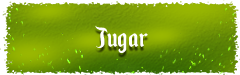
<style>
.page{position:relative;width:240px;height:75px}
.page>*{position:absolute;margin:0}
.t1{font:32.5px "EnchantedLand";color:#ffffff}
</style>
<div class="page">
<p class="t1" style="left:95px;top:25px;width:53px;height:28px">Jugar</p>
</div>
